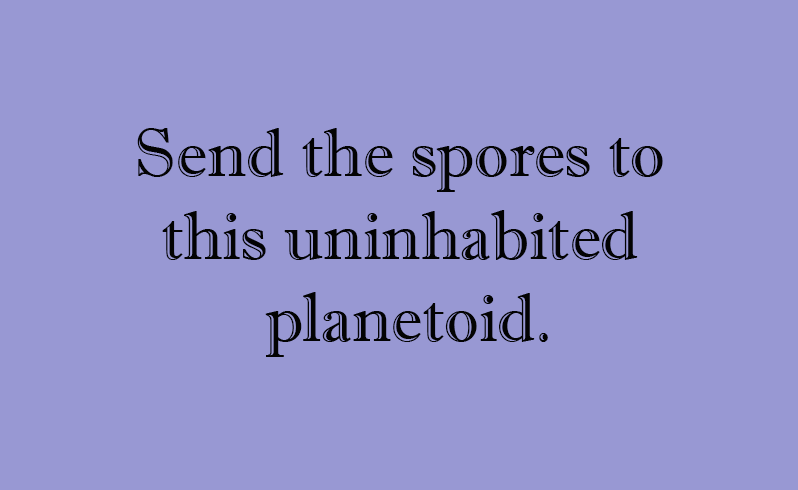
<style>
.page{position:relative;width:798px;height:490px;background:#9898d3}
.page>*{position:absolute;margin:0}
.t1{font:68.7px "ImprintMT-Shadow";color:#030303}
</style>
<div class="page">
<p class="t1" style="left:137px;top:128px;width:526px;height:229px;text-align:center">Send the spores to <br>this uninhabited <br>planetoid.</p>
</div>
